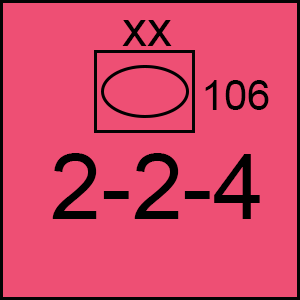
<style>
.page{position:relative;width:300px;height:300px;background:#ee4f74}
.page>*{position:absolute;margin:0}
.t1{font:50px "ArialMT";color:#000000}
.t2{font:41.7px "ArialMT";color:#000000}
.t3{font:91.7px "ArialMT";color:#000000}
</style>
<div class="page">
<p class="t1" style="left:122px;top:20px;width:50px;height:26px">xx</p>
<p class="t2" style="left:205px;top:80px;width:64px;height:30px">106</p>
<p class="t3" style="left:52px;top:153px;width:208px;height:66px">2-2-4</p>
</div>
